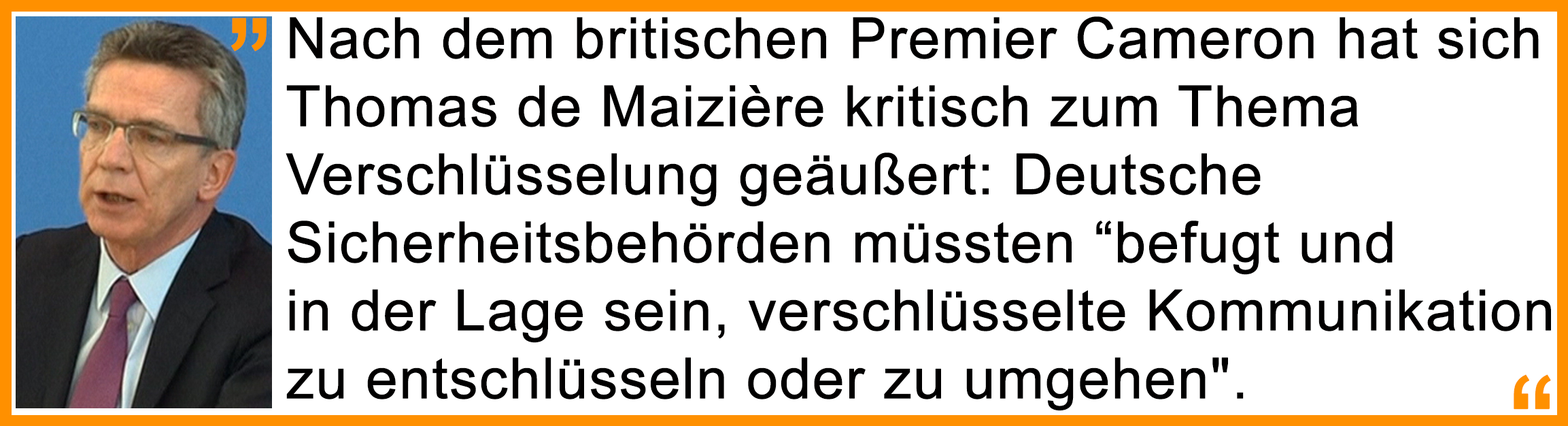
<style>
.page{position:relative;width:1568px;height:426px;background:#ffffff}
.page>*{position:absolute;margin:0}
.t1{font:136px "ArialMT";color:#ff9000;font-weight:bold}
.t2{font:56.7px "ArialMT";color:#010000;font-weight:bold}
.t3{font:5.7px "ArialMT";color:#010000;font-weight:bold}
.t4{font:141.7px "ArialMT";color:#ff9000;font-weight:bold}
</style>
<div class="page">
<p class="t1" style="left:231px;top:18px;width:36px;height:34px">“</p>
<p class="t2" style="left:286px;top:16px;width:1265px;height:395px;text-align:right">Nach dem britischen Premier Cameron hat sich<br>Thomas de Maizière kritisch zum Thema<br>Verschlüsselung geäußert: Deutsche<br>Sicherheitsbehörden müssten “befugt und<br>in der Lage sein, verschlüsselte Kommunikation<br>zu entschlüsseln oder zu umgehen".<span class="t3">h</span></p>
<p class="t4" style="left:1514px;top:374px;width:37px;height:35px;rotate:-180deg">“</p>
</div>
